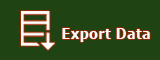
<style>
.page{position:relative;width:160px;height:60px;background:#204313}
.page>*{position:absolute;margin:0}
.t1{font:15.3px "Verdana-Bold";color:#fdfcfc;scale:0.88 1}
</style>
<div class="page">
<p class="t1" style="left:62px;top:28px;width:88px;height:14px">Export Data</p>
</div>
